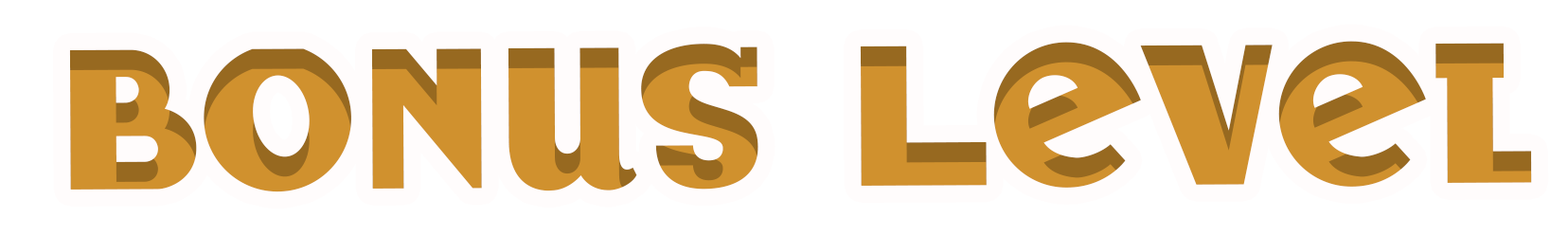
<style>
.page{position:relative;width:1568px;height:236px;background:#ffffff}
.page>*{position:absolute;margin:0}
.t1{font:193.2px "BadTyp-Regular";color:#d0912e}
</style>
<div class="page">
<p class="t1" style="left:69px;top:41px;width:1463px;height:151px">Bonus Level</p>
</div>
